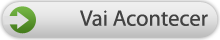
<style>
.page{position:relative;width:220px;height:40px}
.page>*{position:absolute;margin:0}
.t1{font:22.5px "MyriadPro-Regular";color:#424242}
</style>
<div class="page">
<p class="t1" style="left:80px;top:10px;width:128px;height:16px">Vai Acontecer</p>
</div>
